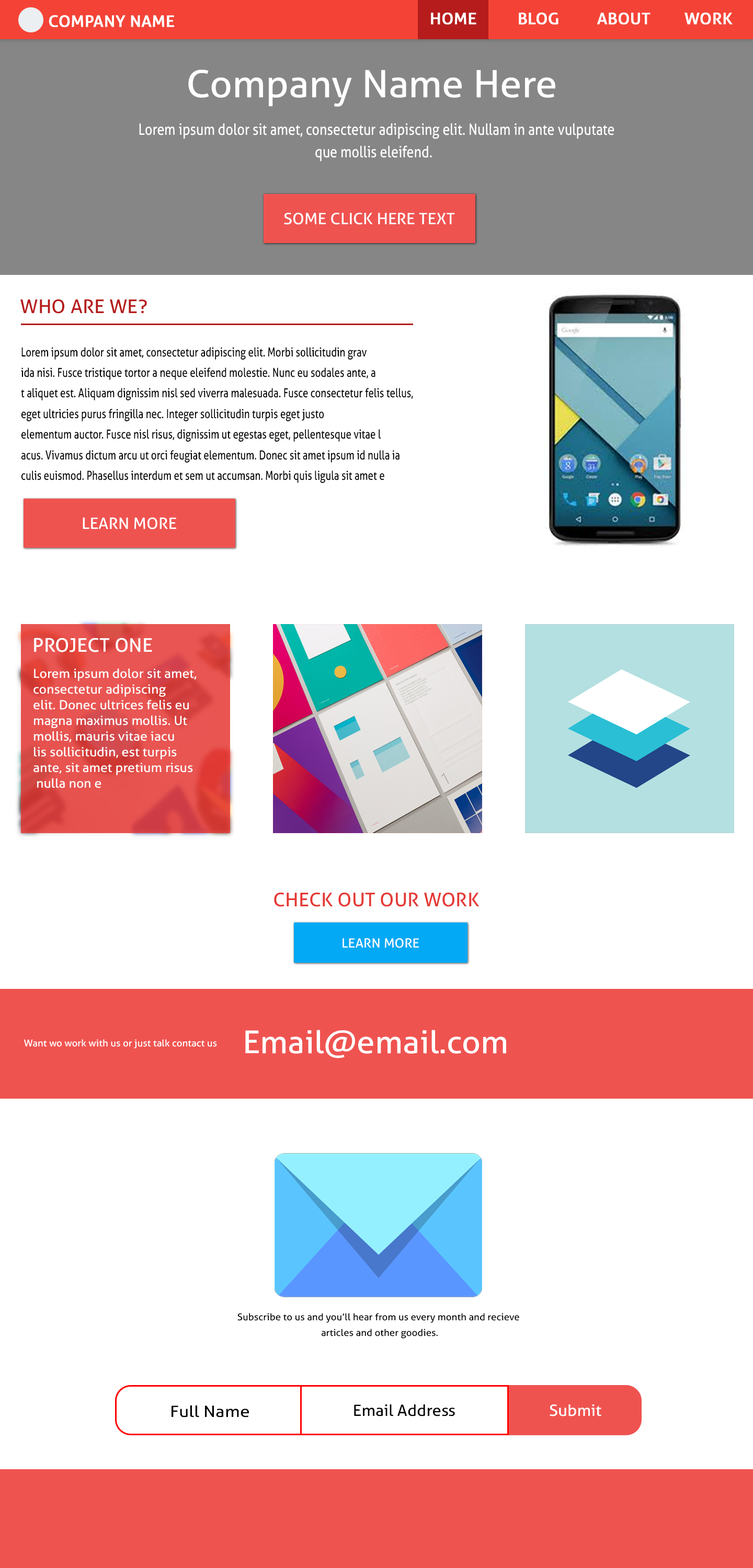
<style>
.page{position:relative;width:753px;height:1568px;background:#ffffff}
.page>*{position:absolute;margin:0}
.t1{font:15.7px "Aller";color:#ffffff;font-weight:bold;scale:1.04 1}
.t2{font:37.6px "Aller";color:#ffffff;scale:1.04 1}
.t3{font:15.7px/22.3px "Aller";color:#ffffff;scale:0.84 1}
.t4{font:15.7px "Aller";color:#ffffff;text-transform:uppercase;scale:1.04 1}
.t5{font:18.8px "Aller";color:#b71c1c;text-transform:uppercase;scale:1.04 1}
.t6{font:12.4px/20.6px "Aller";color:#000000;scale:0.79 1}
.t7{font:18.8px "Aller";color:#ffffff;text-transform:uppercase;scale:1.04 1}
.t8{font:12.5px/15.7px "Aller";color:#ffffff;scale:1.04 1}
.t9{font:18.8px "Aller";color:#e53935;text-transform:uppercase;scale:1.04 1}
.t10{font:12.8px "Aller";color:#ffffff;text-transform:uppercase;scale:1.04 1}
.t11{font:31.4px "Aller";color:#ffffff;scale:1.04 1}
.t12{font:9.4px "Aller";color:#ffffff;scale:1.04 1}
.t13{font:9.4px/15.7px "Aller";color:#000000;scale:1.04 1}
.t14{font:15.7px "Aller";color:#000000;scale:1.13 1}
.t15{font:15.7px "Aller";color:#000000;scale:1.04 1}
.t16{font:15.7px "Aller";color:#ffffff;scale:1.04 1}
</style>
<div class="page">
<p class="t1" style="left:49px;top:15px;width:125px;height:12px">COMPANY NAME</p>
<p class="t1" style="left:431px;top:13px;width:45px;height:12px">HOME</p>
<p class="t1" style="left:518px;top:13px;width:40px;height:12px">BLOG</p>
<p class="t1" style="left:597px;top:13px;width:53px;height:12px">ABOUT</p>
<p class="t1" style="left:684px;top:13px;width:48px;height:12px">WORK</p>
<p class="t2" style="left:188px;top:70px;width:367px;height:37px">Company Name Here</p>
<p class="t3" style="left:139px;top:123px;width:475px;height:39px;text-align:center">Lorem ipsum dolor sit amet, consectetur adipiscing elit. Nullam in ante vulputate <br>que mollis eleifend.</p>
<p class="t4" style="left:284px;top:213px;width:171px;height:12px">Some Click Here Text</p>
<p class="t5" style="left:20px;top:299px;width:127px;height:15px">Who Are we?</p>
<p class="t6" style="left:21px;top:347px;width:392px;height:136px">Lorem ipsum dolor sit amet, consectetur adipiscing elit. Morbi sollicitudin grav<br>ida nisi. Fusce tristique tortor a neque eleifend molestie. Nunc eu sodales ante, a<br>t aliquet est. Aliquam dignissim nisl sed viverra malesuada. Fusce consectetur felis tellus, <br>eget ultricies purus fringilla nec. Integer sollicitudin turpis eget justo <br>elementum auctor. Fusce nisl risus, dignissim ut egestas eget, pellentesque vitae l<br>acus. Vivamus dictum arcu ut orci feugiat elementum. Donec sit amet ipsum id nulla ia<br>culis euismod. Phasellus interdum et sem ut accumsan. Morbi quis ligula sit amet e</p>
<p class="t4" style="left:83px;top:517px;width:93px;height:12px">Learn More</p>
<p class="t7" style="left:34px;top:638px;width:118px;height:14px">Project One</p>
<p class="t8" style="left:33px;top:668px;width:164px;height:120px">Lorem ipsum dolor sit amet, <br>consectetur adipiscing<br>elit. Donec ultrices felis eu <br>magna maximus mollis. Ut <br>mollis, mauris vitae iacu<br>lis sollicitudin, est turpis <br>ante, sit amet pretium risus<br> nulla non e</p>
<p class="t9" style="left:274px;top:892px;width:205px;height:15px">CHECK OUT OUR WORK</p>
<p class="t10" style="left:342px;top:938px;width:77px;height:10px">Learn More</p>
<p class="t11" style="left:245px;top:1030px;width:261px;height:28px">Email@email.com</p>
<p class="t12" style="left:24px;top:1039px;width:193px;height:9px">Want wo work with us or just talk contact us</p>
<p class="t13" style="left:237px;top:1313px;width:282px;height:26px;text-align:center">Subscribe to us and you’ll hear from us every month and recieve <br>articles and other goodies.</p>
<p class="t14" style="left:171px;top:1405px;width:78px;height:12px">Full Name</p>
<p class="t15" style="left:354px;top:1404px;width:101px;height:12px">Email Address</p>
<p class="t16" style="left:549px;top:1404px;width:52px;height:12px">Submit</p>
</div>
